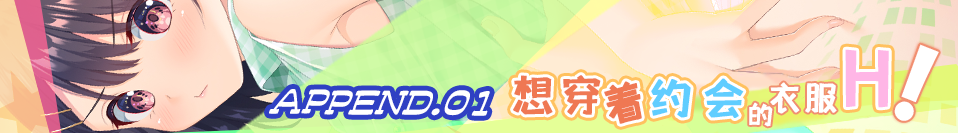
<style>
.page{position:relative;width:958px;height:133px}
.page>*{position:absolute;margin:0}
.t1{font:77px "shetumodengxiaofangti";letter-spacing:0.16em;color:#ffb6e6;text-transform:uppercase;font-weight:bold}
.t2{font:44.3px "shetumodengxiaofangti";letter-spacing:0.08em;color:#ef7853;text-transform:uppercase;font-weight:bold}
.t3{font:44.3px "shetumodengxiaofangti";letter-spacing:0.16em;color:#60cdff;text-transform:uppercase;font-weight:bold}
.t4{font:44.3px "shetumodengxiaofangti";letter-spacing:0.16em;color:#ef7853;text-transform:uppercase;font-weight:bold}
.t5{font:34.6px "shetumodengxiaofangti";letter-spacing:0.02em;color:#ffffff;text-transform:uppercase;font-weight:bold}
.t6{font:26.5px "shetumodengxiaofangti";letter-spacing:0.16em;color:#ffffff;text-transform:uppercase;font-weight:bold}
</style>
<div class="page">
<p class="t1" style="left:845px;top:49px;width:44px;height:59px;rotate:1deg">H</p>
<p class="t2" style="left:513px;top:75px;width:88px;height:40px">想穿</p>
<p class="t3" style="left:651px;top:78px;width:93px;height:40px;rotate:1deg">约会</p>
<p class="t4" style="left:604px;top:81px;width:38px;height:43px;rotate:-14deg">着</p>
<p class="t5" style="left:770px;top:82px;width:67px;height:32px;rotate:1deg">衣服</p>
<p class="t6" style="left:749px;top:102px;width:24px;height:25px;rotate:1deg">的</p>
</div>
